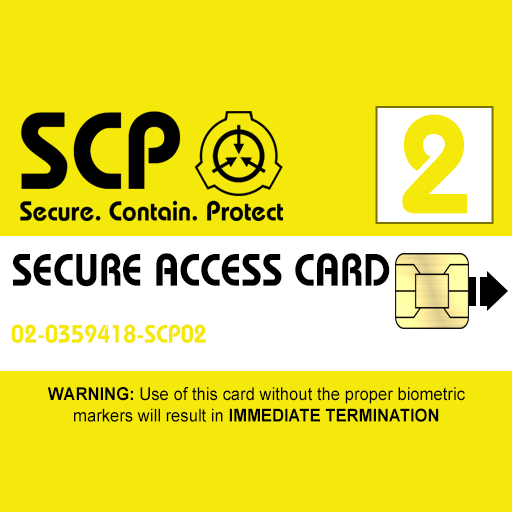
<style>
.page{position:relative;width:512px;height:512px;background:#f5e90c}
.page>*{position:absolute;margin:0}
.t1{font:138.7px "BauhausLT-Demi";color:#f5e90c;scale:0.95 1}
.t2{font:45.5px "BauhausLT-Demi";color:#000000;text-transform:uppercase;scale:0.91 1}
.t3{font:25.5px "BauhausLT-Demi";color:#f5e90c;scale:0.92 1}
.t4{font:17.8px "ArialMT";color:#000000;scale:0.93 1}
.t5{font:17.8px "Arial-BoldMT";color:#000000;scale:0.93 1}
</style>
<div class="page">
<p class="t1" style="left:402px;top:114px;width:65px;height:100px">2</p>
<p class="t2" style="left:13px;top:253px;width:377px;height:34px">Secure Access Card</p>
<p class="t3" style="left:11px;top:324px;width:195px;height:19px">02-0359418-SCP02</p>
<p class="t4" style="left:47px;top:387px;width:418px;height:35px;text-align:center"><span class="t5">WARNING: </span>Use of this card without the proper biometric<br>markers will result in <span class="t5">IMMEDIATE TERMINATION</span></p>
</div>
